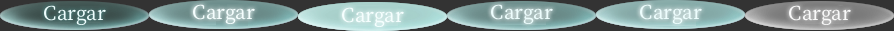
<style>
.page{position:relative;width:894px;height:31px;background:#333333}
.page>*{position:absolute;margin:0}
.t1{font:23px "OfficialFateFont-Medium";color:#edfdfd}
.t2{font:23px "OfficialFateFont-Medium";color:#f5fefe}
.t3{font:23px "OfficialFateFont-Medium";color:#f9f9f9}
</style>
<div class="page">
<p class="t1" style="left:44px;top:5px;width:62px;height:21px">Cargar</p>
<p class="t2" style="left:193px;top:4px;width:62px;height:21px">Cargar</p>
<p class="t1" style="left:491px;top:4px;width:62px;height:21px">Cargar</p>
<p class="t1" style="left:640px;top:4px;width:62px;height:21px">Cargar</p>
<p class="t3" style="left:789px;top:5px;width:62px;height:21px">Cargar</p>
<p class="t2" style="left:342px;top:7px;width:62px;height:21px">Cargar</p>
</div>
